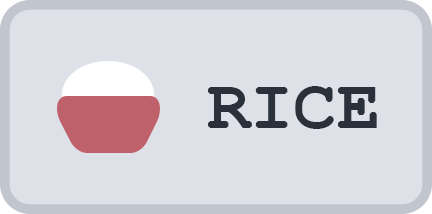
<style>
.page{position:relative;width:432px;height:214px;background:#dfe1e8}
.page>*{position:absolute;margin:0}
.t1{font:72px "CourierNewPS-BoldMT";color:#2b303b}
</style>
<div class="page">
<p class="t1" style="left:208px;top:86px;width:169px;height:43px">RICE</p>
</div>
